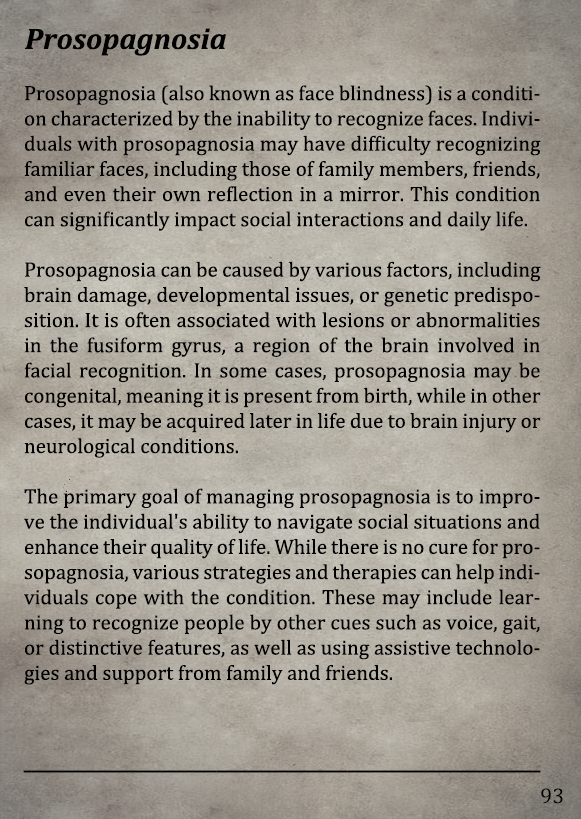
<style>
.page{position:relative;width:581px;height:819px}
.page>*{position:absolute;margin:0}
.t1{font:30px "Cambria-BoldItalic";color:#000000}
.t2{font:21px "Cambria";color:#000000}
.t3{font:21px "Arimo";color:#000000;scale:0.66 1}
.t4{font:21.5px "Cambria";color:#000000}
</style>
<div class="page">
<p class="t1" style="left:25px;top:28px;width:201px;height:28px">Prosopagnosia</p>
<p class="t2" style="left:24px;top:85px;width:517px;height:600px;text-align:justify">Prosopagnosia (also known as face blindness) is a condition characterized by the inability to recognize faces. Individuals with prosopagnosia may have difficulty recognizing familiar faces, including those of family members, friends, and even their own reflection in a mirror. This condition can significantly impact social interactions and daily life.<br><br>Prosopagnosia can be caused by various factors, including brain damage, developmental issues, or genetic predisposition. It is often associated with lesions or abnormalities in the fusiform gyrus, a region of the brain involved in facial recognition. In some cases, prosopagnosia may be congenital, meaning it is present from birth, while in other cases, it may be acquired later in life due to brain injury or neurological conditions.<br><br>The primary goal of managing prosopagnosia is to improve the individual's ability to navigate social situations and enhance their quality of life. While there is no cure for prosopagnosia, various strategies and therapies can help individuals cope with the condition. These may include learning to recognize people by other cues such as voice, gait, or distinctive features, as well as using assistive technologies and support from family and friends.</p>
<p class="t3" style="left:23px;top:770px;width:518px;height:3px">___________________________________________________________________</p>
<p class="t4" style="left:541px;top:788px;width:22px;height:16px">93</p>
</div>
